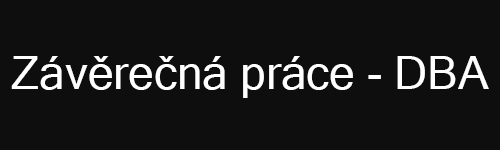
<style>
.page{position:relative;width:500px;height:150px;background:#0f0e0e}
.page>*{position:absolute;margin:0}
.t1{font:45.8px "MicrosoftSansSerif";color:#ffffff}
</style>
<div class="page">
<p class="t1" style="left:11px;top:56px;width:478px;height:42px">Závěrečná práce - DBA</p>
</div>
